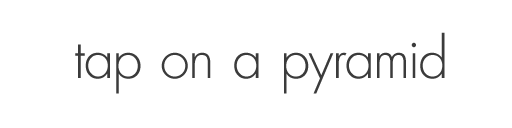
<style>
.page{position:relative;width:512px;height:128px;background:#ffffff}
.page>*{position:absolute;margin:0}
.t1{font:57px "AFuturicaLtThin";color:#3b3b3b}
</style>
<div class="page">
<p class="t1" style="left:75px;top:32px;width:370px;height:62px">tap on a pyramid</p>
</div>
